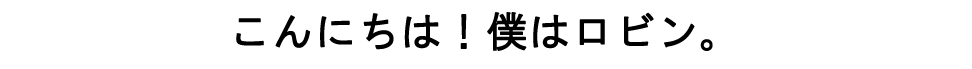
<style>
.page{position:relative;width:972px;height:69px;background:#ffffff}
.page>*{position:absolute;margin:0}
.t1{font:41.7px "HGGothicM";color:#000000;font-weight:bold}
</style>
<div class="page">
<p class="t1" style="left:236px;top:12px;width:477px;height:39px">こんにちは！僕はロビン。</p>
</div>
